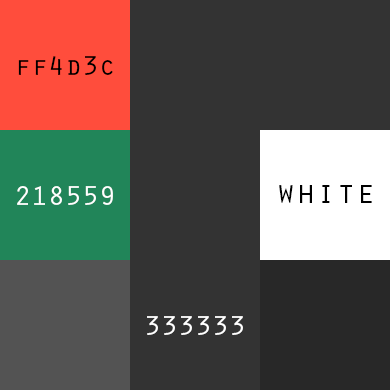
<style>
.page{position:relative;width:390px;height:390px;background:#333333}
.page>*{position:absolute;margin:0}
.t1{font:28.5px "OratorStd";color:#000000}
.t2{font:33.3px "OratorStd";color:#000000}
.t3{font:28.5px "OratorStd";color:#ffffff}
</style>
<div class="page">
<p class="t1" style="left:18px;top:56px;width:95px;height:19px">ff4d3c</p>
<p class="t2" style="left:279px;top:185px;width:93px;height:18px">white</p>
<p class="t3" style="left:17px;top:186px;width:96px;height:19px">218559</p>
<p class="t3" style="left:147px;top:316px;width:96px;height:19px">333333</p>
</div>
